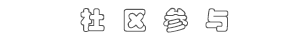
<style>
.page{position:relative;width:300px;height:40px;background:#ffffff}
.page>*{position:absolute;margin:0}
.t1{font:25px "HGCY_CNKI";color:#595959}
</style>
<div class="page">
<p class="t1" style="left:80px;top:7px;width:149px;height:26px">社  区  参  与</p>
</div>
